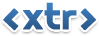
<style>
.page{position:relative;width:99px;height:36px;background:#ffffff}
.page>*{position:absolute;margin:0}
.t1{font:36px "Righteous-Regular";letter-spacing:0.01em;color:#3369a0;font-weight:bold}
.t2{font:36px "Righteous-Regular";letter-spacing:0.075em;color:#3369a0;font-weight:bold}
</style>
<div class="page">
<p class="t1" style="left:3px;top:2px;width:93px;height:29px"><span class="t2">&lt;</span>xt<span class="t2">r&gt;</span></p>
</div>
